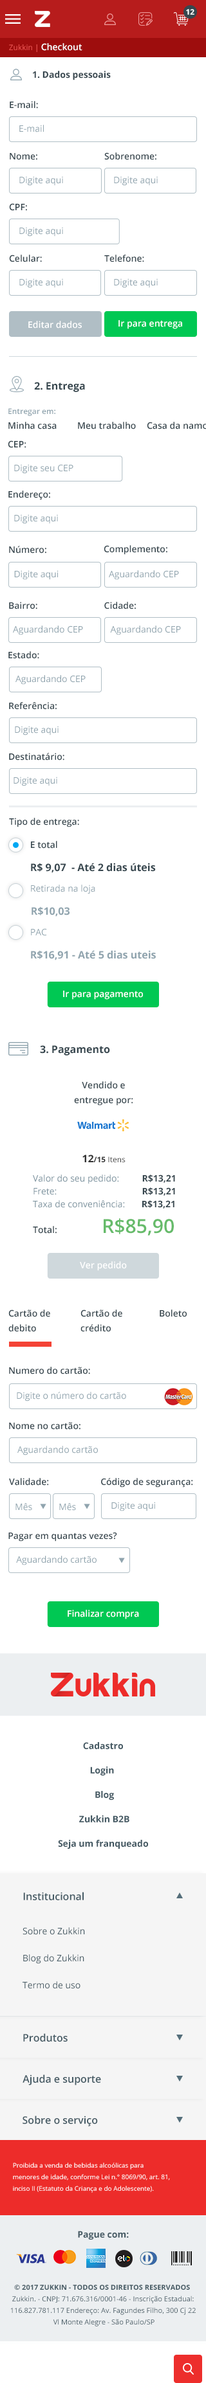
<style>
.page{position:relative;width:206px;height:2383px;background:#ffffff}
.page>*{position:absolute;margin:0}
.t1{font:7.7px "OpenSans-Bold";color:#ffffff;text-transform:uppercase}
.t2{font:7.7px "OpenSans";color:#ef5350}
.t3{font:9px "OpenSans-Semibold";color:#ffffff}
.t4{font:9px "OpenSans-Bold";color:#37474f}
.t5{font:9px "OpenSans-Semibold";color:#37474f}
.t6{font:9px "OpenSans";color:#90a4ae}
.t7{font:10.3px "OpenSans-Bold";color:#37474f}
.t8{font:10.3px/23.1px "OpenSans-Bold";color:#37474f}
.t9{font:9px/14.8px "OpenSans-Semibold";color:#37474f}
.t10{font:9px/23.1px "OpenSans-Semibold";color:#37474f}
.t11{font:9px/20.6px "OpenSans";color:#90a4ae}
.t12{font:10.3px/20.6px "OpenSans-Bold";color:#90a4ae}
.t13{font:9px/19.9px "OpenSans";color:#90a4ae}
.t14{font:10.3px/19.9px "OpenSans-Bold";color:#90a4ae}
.t15{font:9px/12.9px "OpenSans";color:#78909c}
.t16{font:10.3px/20.6px "OpenSans-Bold";color:#333333}
.t17{font:7.7px/20.6px "OpenSans-Bold";color:#333333}
.t18{font:7.7px/20.6px "OpenSans";color:#333333}
.t19{font:9px/19.3px "OpenSans";color:#78909c}
.t20{font:9px/19.3px "OpenSans-Bold";color:#37474f}
.t21{font:9px/12.9px "OpenSans-Bold";color:#37474f}
.t22{font:9px/12.9px "OpenSans-Semibold";color:#37474f}
.t23{font:19.3px/25.7px "OpenSans-Semibold";color:#66bb6a}
.t24{font:9px/24.4px "OpenSans-Bold";color:#455a64}
.t25{font:10.3px "OpenSans-Semibold";color:#455a64}
.t26{font:9px/27px "OpenSans";color:#455a64}
.t27{font:6.4px/11.6px "OpenSans";color:#ffffff}
.t28{font:9px "OpenSans-Bold";color:#455a64}
.t29{font:7.1px/11.6px "OpenSans";color:#455a64}
.t30{font:7.1px/11.6px "OpenSans-Bold";color:#455a64}
</style>
<div class="page">
<p class="t1" style="left:186px;top:9px;width:8px;height:6px">12</p>
<p class="t2" style="left:9px;top:43px;width:73px;height:9px">Zukkin | <span class="t3">Checkout</span></p>
<p class="t4" style="left:33px;top:71px;width:78px;height:9px">1. Dados pessoais</p>
<p class="t5" style="left:10px;top:101px;width:28px;height:8px">E-mail:</p>
<p class="t6" style="left:19px;top:125px;width:25px;height:7px">E-mail</p>
<p class="t5" style="left:10px;top:153px;width:27px;height:7px">Nome:</p>
<p class="t5" style="left:104px;top:152px;width:52px;height:8px">Sobrenome:</p>
<p class="t6" style="left:19px;top:176px;width:44px;height:10px">Digite aqui</p>
<p class="t6" style="left:114px;top:176px;width:44px;height:10px">Digite aqui</p>
<p class="t5" style="left:9px;top:203px;width:18px;height:8px">CPF:</p>
<p class="t6" style="left:19px;top:227px;width:44px;height:10px">Digite aqui</p>
<p class="t5" style="left:9px;top:255px;width:33px;height:7px">Celular:</p>
<p class="t5" style="left:104px;top:255px;width:40px;height:7px">Telefone:</p>
<p class="t6" style="left:19px;top:278px;width:44px;height:10px">Digite aqui</p>
<p class="t6" style="left:114px;top:278px;width:44px;height:10px">Digite aqui</p>
<p class="t3" style="left:28px;top:321px;width:54px;height:7px">Editar dados</p>
<p class="t3" style="left:118px;top:320px;width:64px;height:9px">Ir para entrega</p>
<p class="t7" style="left:34px;top:382px;width:51px;height:10px">2. Entrega</p>
<p class="t5" style="left:8px;top:440px;width:18px;height:8px">CEP:</p>
<p class="t6" style="left:14px;top:464px;width:59px;height:10px">Digite seu CEP</p>
<p class="t5" style="left:8px;top:491px;width:42px;height:9px">Endereço:</p>
<p class="t6" style="left:14px;top:514px;width:44px;height:10px">Digite aqui</p>
<p class="t5" style="left:9px;top:546px;width:37px;height:8px">Número:</p>
<p class="t5" style="left:104px;top:545px;width:63px;height:10px">Complemento:</p>
<p class="t6" style="left:14px;top:570px;width:45px;height:10px">Digite aqui</p>
<p class="t6" style="left:109px;top:570px;width:70px;height:10px">Aguardando CEP</p>
<p class="t5" style="left:9px;top:602px;width:28px;height:7px">Bairro:</p>
<p class="t5" style="left:104px;top:602px;width:32px;height:7px">Cidade:</p>
<p class="t6" style="left:13px;top:626px;width:70px;height:9px">Aguardando CEP</p>
<p class="t6" style="left:110px;top:626px;width:71px;height:9px">Aguardando CEP</p>
<p class="t5" style="left:8px;top:651px;width:31px;height:8px">Estado:</p>
<p class="t6" style="left:15px;top:675px;width:71px;height:10px">Aguardando CEP</p>
<p class="t5" style="left:9px;top:702px;width:48px;height:8px">Referência:</p>
<p class="t6" style="left:15px;top:726px;width:44px;height:9px">Digite aqui</p>
<p class="t5" style="left:9px;top:753px;width:55px;height:7px">Destinatário:</p>
<p class="t6" style="left:14px;top:777px;width:43px;height:9px">Digite aqui</p>
<p class="t8" style="left:9px;top:818px;width:147px;height:142px"><span class="t9">Tipo de entrega:<br></span><span class="t10">         E total <br>         </span>R$ 9,07  - Até 2 dias úteis<br><span class="t11">         Retirada na loja<br>         </span><span class="t12">R$10,03<br>         </span><span class="t13">PAC <br>         </span><span class="t14">R$16,91 - Até 5 dias uteis</span></p>
<p class="t3" style="left:63px;top:991px;width:80px;height:9px">Ir para pagamento</p>
<p class="t7" style="left:40px;top:1045px;width:70px;height:11px">3. Pagamento</p>
<p class="t9" style="left:74px;top:1081px;width:59px;height:25px;text-align:center">Vendido e<br>entregue por:</p>
<p class="t15" style="left:33px;top:1155px;width:142px;height:81px;text-align:center"><span class="t16">12</span><span class="t17">/15</span><span class="t18"> Itens<br></span><span class="t19">Valor do seu pedido:        </span><span class="t20">R$13,21<br></span>Frete:          <span class="t21"> R$13,21<br></span>Taxa de conveniência:      <span class="t21"> R$13,21<br></span><span class="t22">Total: </span><span class="t23">R$85,90</span></p>
<p class="t3" style="left:80px;top:1261px;width:47px;height:10px">Ver pedido</p>
<p class="t9" style="left:8px;top:1310px;width:42px;height:22px">Cartão de<br>debito</p>
<p class="t9" style="left:80px;top:1310px;width:42px;height:22px">Cartão de<br>crédito</p>
<p class="t5" style="left:159px;top:1310px;width:27px;height:7px">Boleto</p>
<p class="t5" style="left:9px;top:1367px;width:81px;height:7px">Numero do cartão:</p>
<p class="t6" style="left:17px;top:1392px;width:109px;height:9px">Digite o número do cartão</p>
<p class="t5" style="left:9px;top:1422px;width:71px;height:8px">Nome no cartão:</p>
<p class="t6" style="left:17px;top:1446px;width:81px;height:9px">Aguardando cartão</p>
<p class="t5" style="left:9px;top:1478px;width:40px;height:8px">Validade:</p>
<p class="t5" style="left:101px;top:1478px;width:92px;height:10px">Código de segurança:</p>
<p class="t6" style="left:15px;top:1503px;width:17px;height:8px">Mês</p>
<p class="t6" style="left:59px;top:1503px;width:17px;height:8px">Mês</p>
<p class="t6" style="left:111px;top:1502px;width:44px;height:9px">Digite aqui</p>
<p class="t5" style="left:8px;top:1532px;width:109px;height:10px">Pagar em quantas vezes?</p>
<p class="t6" style="left:16px;top:1556px;width:80px;height:9px">Aguardando cartão</p>
<p class="t3" style="left:68px;top:1610px;width:71px;height:9px">Finalizar compra</p>
<p class="t24" style="left:58px;top:1742px;width:90px;height:107px;text-align:center">Cadastro<br>Login <br> Blog<br> Zukkin B2B<br>Seja um franqueado</p>
<p class="t25" style="left:23px;top:1892px;width:61px;height:8px">Institucional</p>
<p class="t26" style="left:22px;top:1927px;width:63px;height:62px">Sobre o Zukkin<br>Blog do Zukkin<br>Termo de uso</p>
<p class="t25" style="left:23px;top:2033px;width:45px;height:9px">Produtos</p>
<p class="t25" style="left:22px;top:2074px;width:79px;height:11px">Ajuda e suporte</p>
<p class="t25" style="left:22px;top:2116px;width:76px;height:11px">Sobre o serviço</p>
<p class="t27" style="left:13px;top:2163px;width:157px;height:30px">Proibida a venda de bebidas alcoólicas para<br>menores de idade, conforme Lei n.° 8069/90, art. 81,<br>inciso II (Estatuto da Criança e do Adolescente).</p>
<p class="t28" style="left:78px;top:2231px;width:51px;height:9px">Pague com:</p>
<p class="t29" style="left:10px;top:2285px;width:185px;height:41px;text-align:center"><span class="t30">© 2017 ZUKKIN - TODOS OS DIREITOS RESERVADOS <br></span>Zukkin. - CNPJ: 71.676.316/0001-46 - Inscrição Estadual:<br>116.827.781.117 Endereço: Av. Fagundes Filho, 300 Cj 22<br> Vl Monte Alegre - São Paulo/SP</p>
</div>
